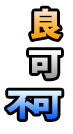
<style>
.page{position:relative;width:73px;height:134px;background:#ffffff}
.page>*{position:absolute;margin:0}
.t1{font:31.6px "KozGoPr6N-Heavy";letter-spacing:-0.04em}
.t2{font:31.6px "KozGoPr6N-Heavy";letter-spacing:-0.025em;scale:1.1 1}
.t3{font:31.6px "KozGoPr6N-Heavy";letter-spacing:-0.24em}
</style>
<div class="page">
<p class="t1" style="left:31px;top:8px;width:30px;height:32px">良</p>
<p class="t2" style="left:29px;top:50px;width:32px;height:29px">可</p>
<p class="t3" style="left:6px;top:90px;width:56px;height:29px">不可</p>
</div>
